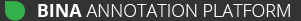
<style>
.page{position:relative;width:301px;height:21px;background:#333333}
.page>*{position:absolute;margin:0}
.t1{font:18px "OpenSans-Light";color:#feffff}
.t2{font:18px "OpenSans-Bold";color:#feffff}
</style>
<div class="page">
<p class="t1" style="left:38px;top:4px;width:252px;height:13px"><span class="t2">BINA </span>ANNOTATION PLATFORM</p>
</div>
